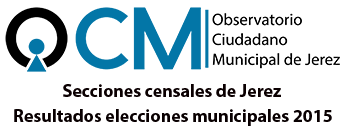
<style>
.page{position:relative;width:345px;height:133px;background:#ffffff}
.page>*{position:absolute;margin:0}
.t1{font:18px "MyriadPro-Bold";color:#0b0001}
.t2{font:18px "MyriadPro-Bold";color:#090001}
</style>
<div class="page">
<p class="t1" style="left:63px;top:84px;width:218px;height:13px">Secciones censales de Jerez</p>
<p class="t2" style="left:14px;top:109px;width:318px;height:17px">Resultados elecciones municipales 2015</p>
</div>
